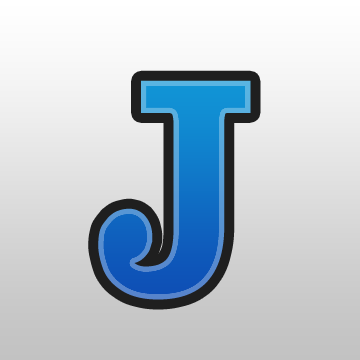
<style>
.page{position:relative;width:360px;height:360px}
.page>*{position:absolute;margin:0}
.t1{font:285.6px "Clarendon-Bold";font-weight:bold;scale:0.81 1}
</style>
<div class="page">
<p class="t1" style="left:0px;top:20px;width:360px;height:211px">J</p>
</div>
